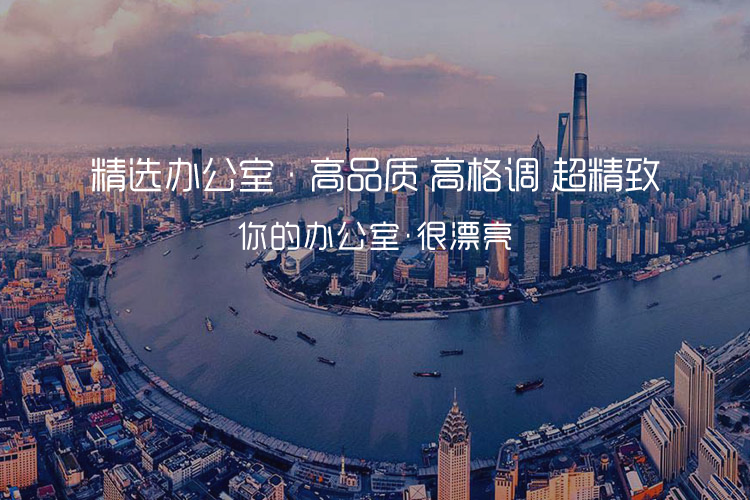
<style>
.page{position:relative;width:750px;height:500px}
.page>*{position:absolute;margin:0}
.t1{font:37px "MFYueHei_Noncommercial-Regular";color:#ffffff}
.t2{font:31px "MFYueHei_Noncommercial-Regular";letter-spacing:0.06em;color:#fefeff}
</style>
<div class="page">
<p class="t1" style="left:91px;top:157px;width:569px;height:35px">精选办公室 · 高品质 高格调 超精致</p>
<p class="t2" style="left:238px;top:221px;width:274px;height:29px">你的办公室·很漂亮</p>
</div>
